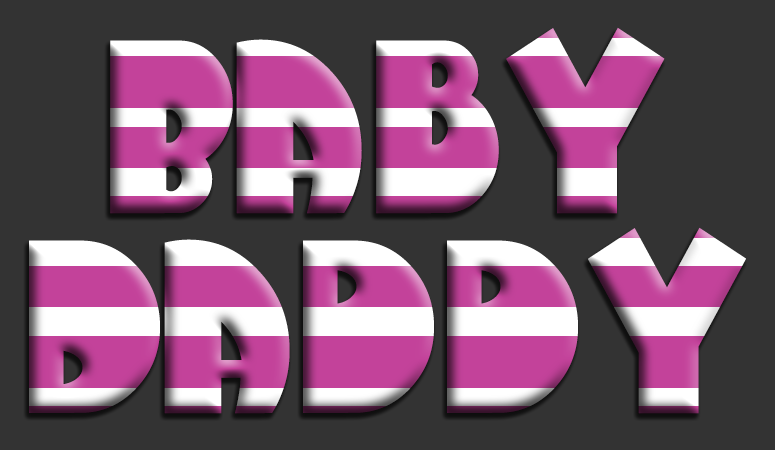
<style>
.page{position:relative;width:775px;height:450px;background:#333333}
.page>*{position:absolute;margin:0}
.t1{font:231px/200px "ArbuckleFat";scale:0.91 1}
</style>
<div class="page">
<p class="t1" style="left:29px;top:27px;width:717px;height:387px;text-align:center">Baby<br>Daddy</p>
</div>
